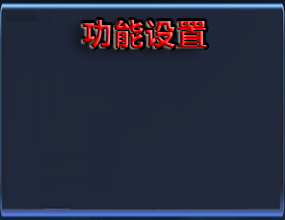
<style>
.page{position:relative;width:285px;height:220px;background:#20283b}
.page>*{position:absolute;margin:0}
.t1{font:30px "MicrosoftYaHei-Bold";letter-spacing:0.05em}
</style>
<div class="page">
<p class="t1" style="left:82px;top:20px;width:125px;height:28px">功能设置</p>
</div>
